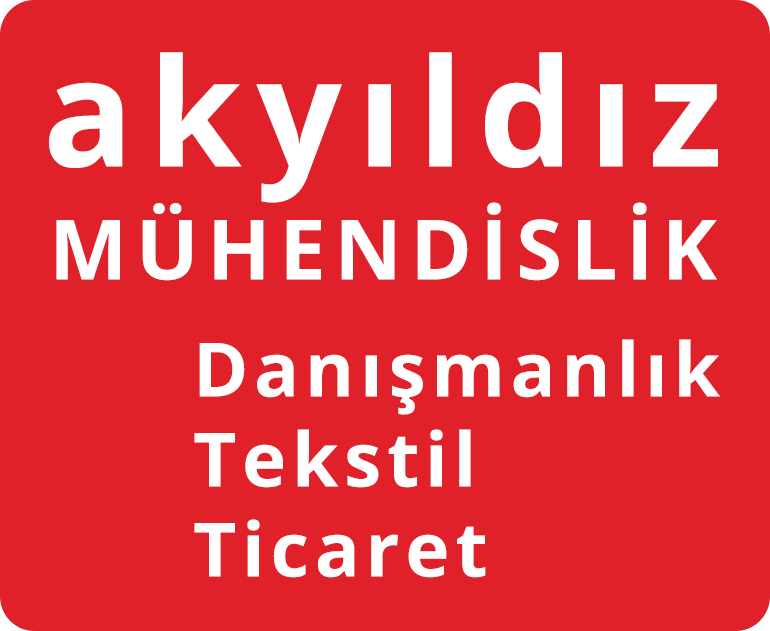
<style>
.page{position:relative;width:770px;height:631px;background:#e02129}
.page>*{position:absolute;margin:0}
.t1{font:150px "OpenSans-Bold";letter-spacing:0.1em;color:#ffffff}
.t2{font:83.3px "OpenSans-Bold";letter-spacing:0.1em;color:#ffffff}
.t3{font:75px "OpenSans-Bold";letter-spacing:0.075em;color:#ffffff}
</style>
<div class="page">
<p class="t1" style="left:49px;top:52px;width:669px;height:151px">akyıldız</p>
<p class="t2" style="left:56px;top:202px;width:661px;height:79px">MÜHENDİSLİK</p>
<p class="t3" style="left:194px;top:339px;width:526px;height:239px">Danışmanlık<br>Tekstil<br>Ticaret</p>
</div>
